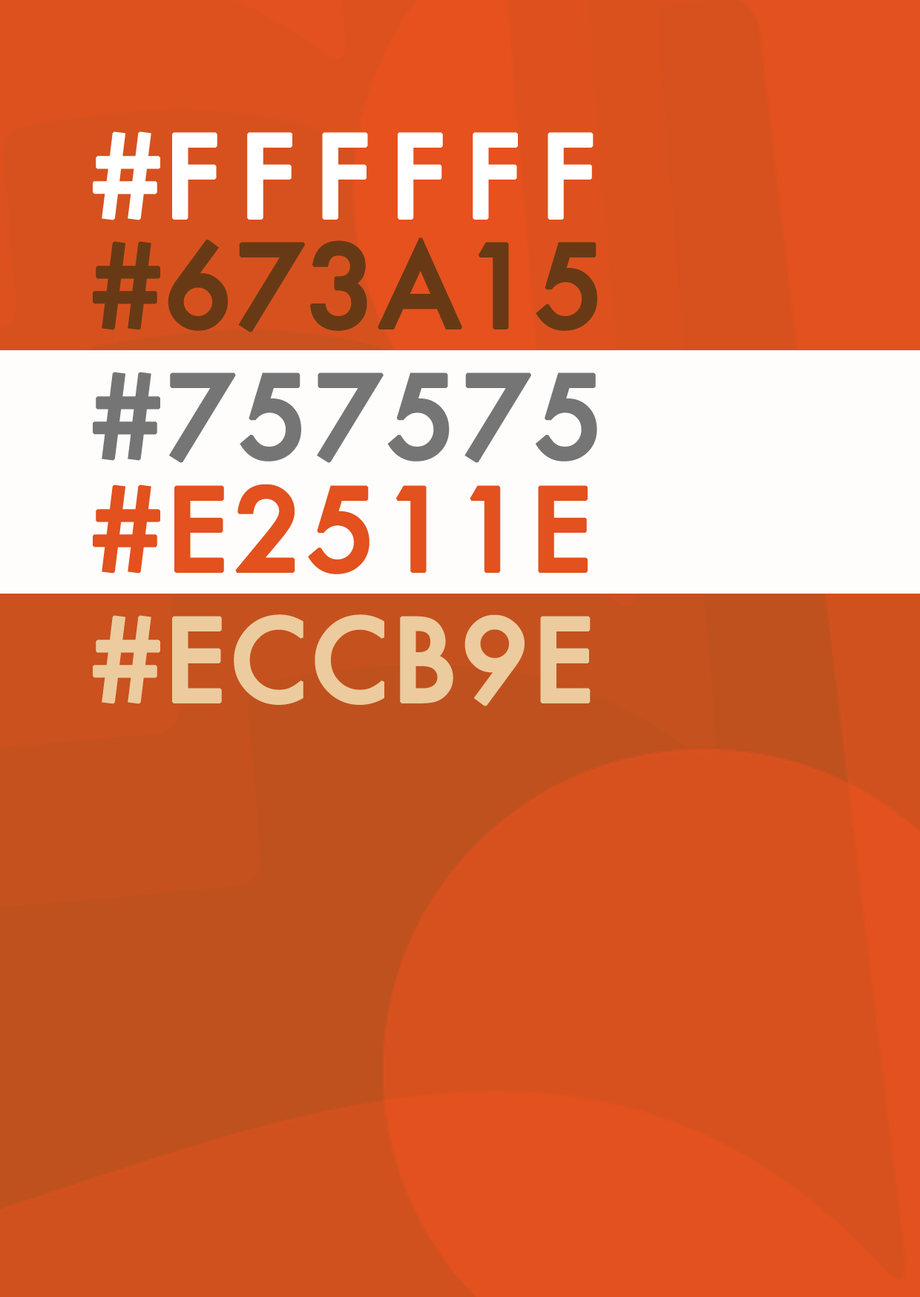
<style>
.page{position:relative;width:920px;height:1297px;background:#d7511e}
.page>*{position:absolute;margin:0}
.t1{font:111.3px "Futura-Medium";letter-spacing:0.14em;color:#ffffff;font-weight:bold}
.t2{font:111.3px "Futura-Medium";color:#ffffff;font-weight:bold}
.t3{font:111.3px "Futura-Medium";color:#673a15;font-weight:bold}
.t4{font:111.3px "Futura-Medium";letter-spacing:0.02em;color:#757575;font-weight:bold}
.t5{font:111.3px "Futura-Medium";letter-spacing:0.02em;color:#e2511e;font-weight:bold}
.t6{font:111.3px "Futura-Medium";color:#eccb9e;font-weight:bold}
</style>
<div class="page">
<p class="t1" style="left:93px;top:131px;width:500px;height:89px"><span class="t2">#</span>FFFFFF</p>
<p class="t3" style="left:93px;top:237px;width:504px;height:95px">#673A15</p>
<p class="t4" style="left:93px;top:372px;width:504px;height:91px">#757575</p>
<p class="t5" style="left:93px;top:484px;width:494px;height:90px">#E2511E</p>
<p class="t6" style="left:93px;top:614px;width:497px;height:92px">#ECCB9E</p>
</div>
